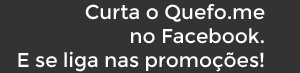
<style>
.page{position:relative;width:300px;height:73px;background:#333333}
.page>*{position:absolute;margin:0}
.t1{font:20px "Montserrat-Regular";color:#ffffff}
</style>
<div class="page">
<p class="t1" style="left:18px;top:4px;width:247px;height:68px;text-align:right">Curta o Quefo.me<br>no Facebook.<br>E se liga nas promoções!</p>
</div>
